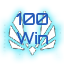
<style>
.page{position:relative;width:64px;height:64px;background:#ffffff}
.page>*{position:absolute;margin:0}
.t1{font:16px "Orbitron-Medium";color:#2059b8}
</style>
<div class="page">
<p class="t1" style="left:15px;top:13px;width:33px;height:31px;text-align:center">100<br>Win</p>
</div>
